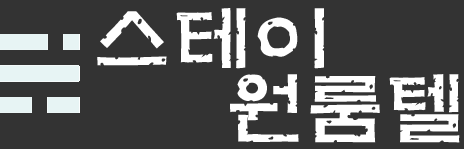
<style>
.page{position:relative;width:464px;height:149px;background:#333333}
.page>*{position:absolute;margin:0}
.t1{font:80px "H2mkpB";color:#ffffff}
</style>
<div class="page">
<p class="t1" style="left:97px;top:8px;width:228px;height:61px">스테이</p>
<p class="t1" style="left:230px;top:74px;width:230px;height:69px">원룸텔</p>
</div>
